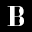
<style>
.page{position:relative;width:32px;height:32px;background:#000000}
.page>*{position:absolute;margin:0}
.t1{font:24px "Bezoar-Bold";color:#ffffff}
</style>
<div class="page">
<p class="t1" style="left:7px;top:6px;width:17px;height:20px">B</p>
</div>
